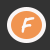
<style>
.page{position:relative;width:50px;height:50px;background:#333333}
.page>*{position:absolute;margin:0}
.t1{font:20px "MVBoli";letter-spacing:-0.05em;color:#fbf8f6;font-weight:bold}
</style>
<div class="page">
<p class="t1" style="left:21px;top:17px;width:14px;height:16px">F</p>
</div>
